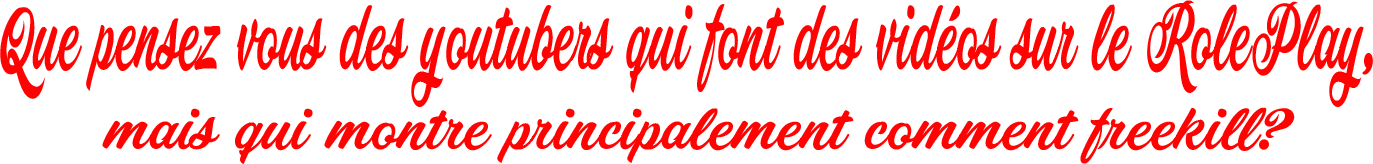
<style>
.page{position:relative;width:1373px;height:164px;background:#ffffff}
.page>*{position:absolute;margin:0}
.t1{font:90.6px "PainterPERSONALUSEONLY";color:#ff0202;scale:0.53 1}
.t2{font:57.3px "PainterPERSONALUSEONLY";color:#ff0202}
</style>
<div class="page">
<p class="t1" style="left:0px;top:0px;width:1373px;height:107px">Que pensez vous des youtubers qui font des vidéos sur le RolePlay,</p>
<p class="t2" style="left:102px;top:107px;width:1193px;height:57px">mais qui montre principalement comment freekill?</p>
</div>
